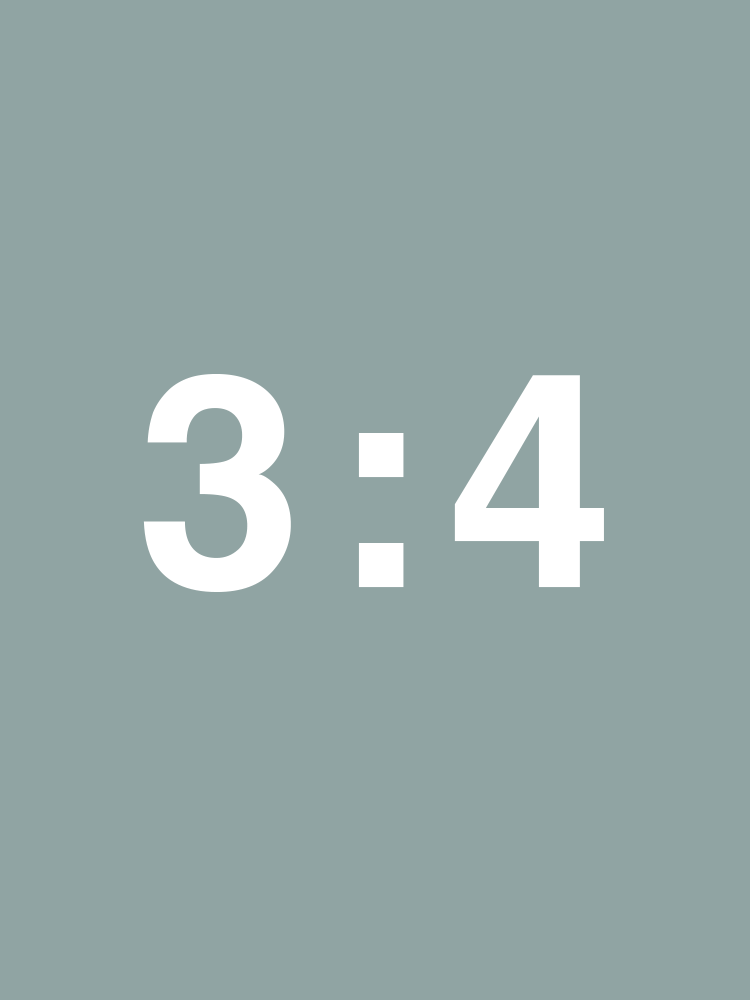
<style>
.page{position:relative;width:750px;height:1000px;background:#90a4a3}
.page>*{position:absolute;margin:0}
.t1{font:300px "Helvetica-Bold";letter-spacing:0.075em;color:#ffffff}
</style>
<div class="page">
<p class="t1" style="left:143px;top:374px;width:461px;height:218px">3:4</p>
</div>
